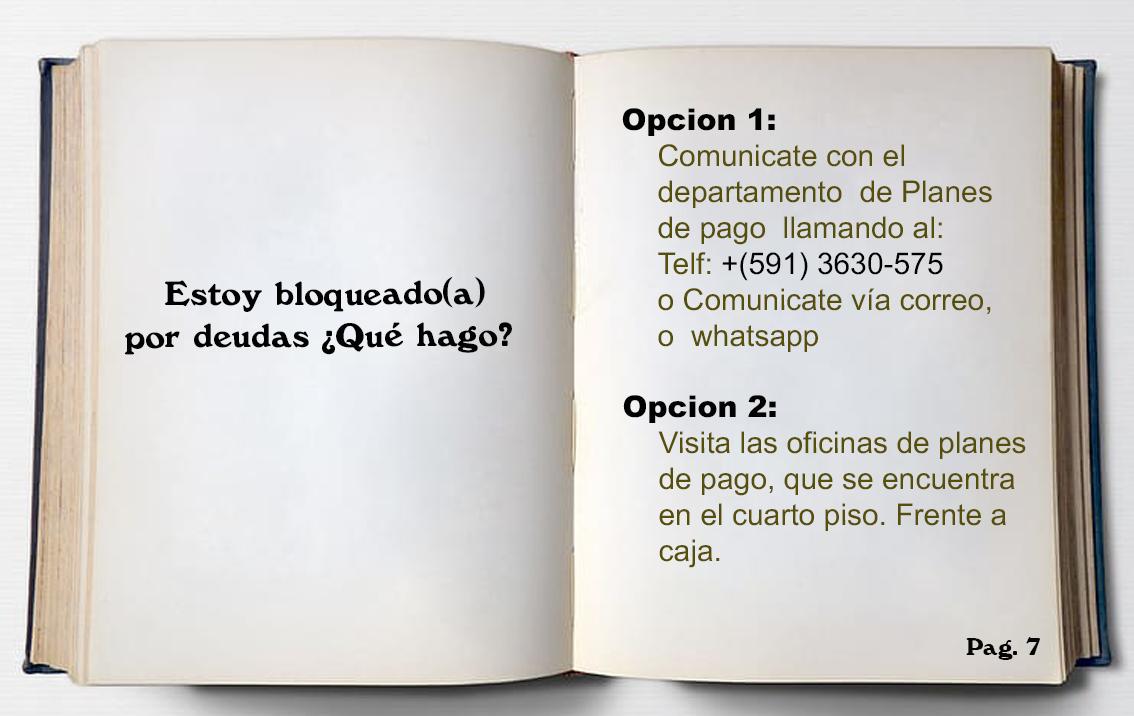
<style>
.page{position:relative;width:1134px;height:716px}
.page>*{position:absolute;margin:0}
.t1{font:30px "ArialMT";color:#564e09}
.t2{font:30px "Arial-Black";color:#020202}
.t3{font:30px "ArialMT";color:#020202}
.t4{font:35px "Windsor-Regular";color:#020202}
.t5{font:25px "Windsor-Regular";color:#040404}
</style>
<div class="page">
<p class="t1" style="left:622px;top:108px;width:370px;height:244px"><span class="t2">Opcion 1: <br>  </span>Comunicate con el <br> departamento  de Planes <br> de pago  llamando al:<br> Telf: <span class="t3">+(591) 3630-575<br></span>  o Comunicate vía correo, <br> o  whatsapp</p>
<p class="t4" style="left:125px;top:276px;width:387px;height:79px;text-align:center">Estoy bloqueado(a) <br>por deudas ¿Qué hago?</p>
<p class="t1" style="left:623px;top:395px;width:403px;height:173px"><span class="t2">Opcion 2: <br>  </span>Visita las oficinas de planes<br> de pago, que se encuentra<br> en el cuarto piso. Frente a <br> caja.</p>
<p class="t5" style="left:966px;top:637px;width:74px;height:23px">Pag. 7</p>
</div>
